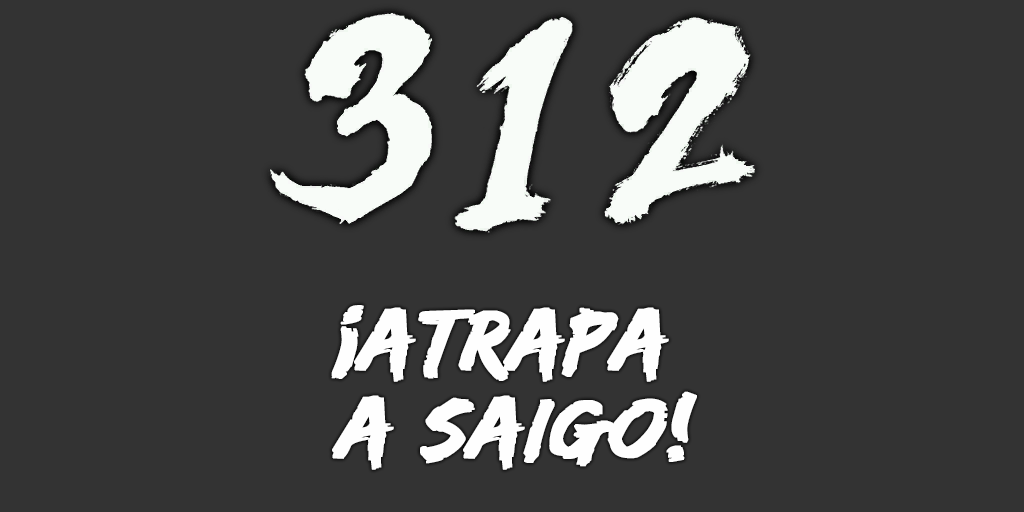
<style>
.page{position:relative;width:1024px;height:512px;background:#333333}
.page>*{position:absolute;margin:0}
.t1{font:88px/88px "EdoSZ";color:#fefefe;font-weight:bold;font-style:italic;scale:1.04 1}
</style>
<div class="page">
<p class="t1" style="left:331px;top:305px;width:366px;height:165px;text-align:center">¡atrapa <br>a saigo!</p>
</div>
